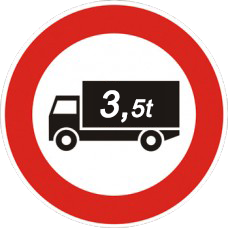
<style>
.page{position:relative;width:228px;height:228px;background:#ffffff}
.page>*{position:absolute;margin:0}
.t1{font:36px "ArialMT";color:#ffffff;font-weight:bold;font-style:italic}
.t2{font:24px "ArialMT";color:#ffffff;font-weight:bold;font-style:italic}
</style>
<div class="page">
<p class="t1" style="left:100px;top:90px;width:54px;height:33px">3,<span class="t2">5t</span></p>
</div>
